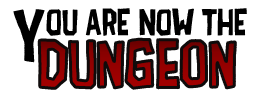
<style>
.page{position:relative;width:261px;height:101px;background:#ffffff}
.page>*{position:absolute;margin:0}
.t1{font:80px "ADPolaquita";color:#010101}
.t2{font:40px "ADPolaquita";color:#000000}
.t3{font:70px "ADPolaquita";text-transform:uppercase}
</style>
<div class="page">
<p class="t1" style="left:13px;top:9px;width:32px;height:54px">Y</p>
<p class="t2" style="left:46px;top:8px;width:201px;height:28px">ou are now the</p>
<p class="t3" style="left:39px;top:39px;width:197px;height:50px">Dungeon</p>
</div>
